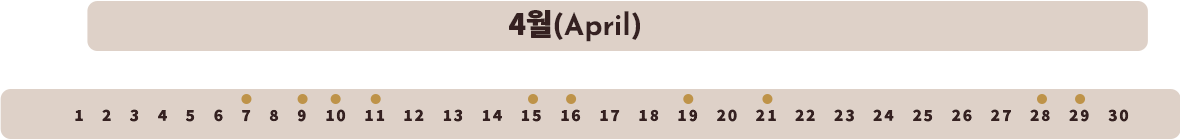
<style>
.page{position:relative;width:1180px;height:140px;background:#ded1c8}
.page>*{position:absolute;margin:0}
.t1{font:30px "JosefinSans-Bold";color:#352121;scale:0.96 1}
.t2{font:30px "NotoSansKR-Black";color:#352121;text-transform:uppercase;scale:0.96 1}
.t3{font:30px "JosefinSans-Bold";color:#352121;text-transform:uppercase;scale:0.96 1}
.t4{font:15px "NotoSansKR-Black";letter-spacing:0.14em;color:#352121;text-transform:uppercase}
</style>
<div class="page">
<p class="t1" style="left:509px;top:10px;width:131px;height:32px"><span class="t2">4월</span><span class="t3">(a</span>pril<span class="t3">)</span></p>
<p class="t4" style="left:75px;top:109px;width:1054px;height:13px">1   2   3   4   5   6   7   8   9   10   11   12   13   14   15   16   17   18   19   20   21   22   23   24   25   26   27   28   29   30</p>
</div>
